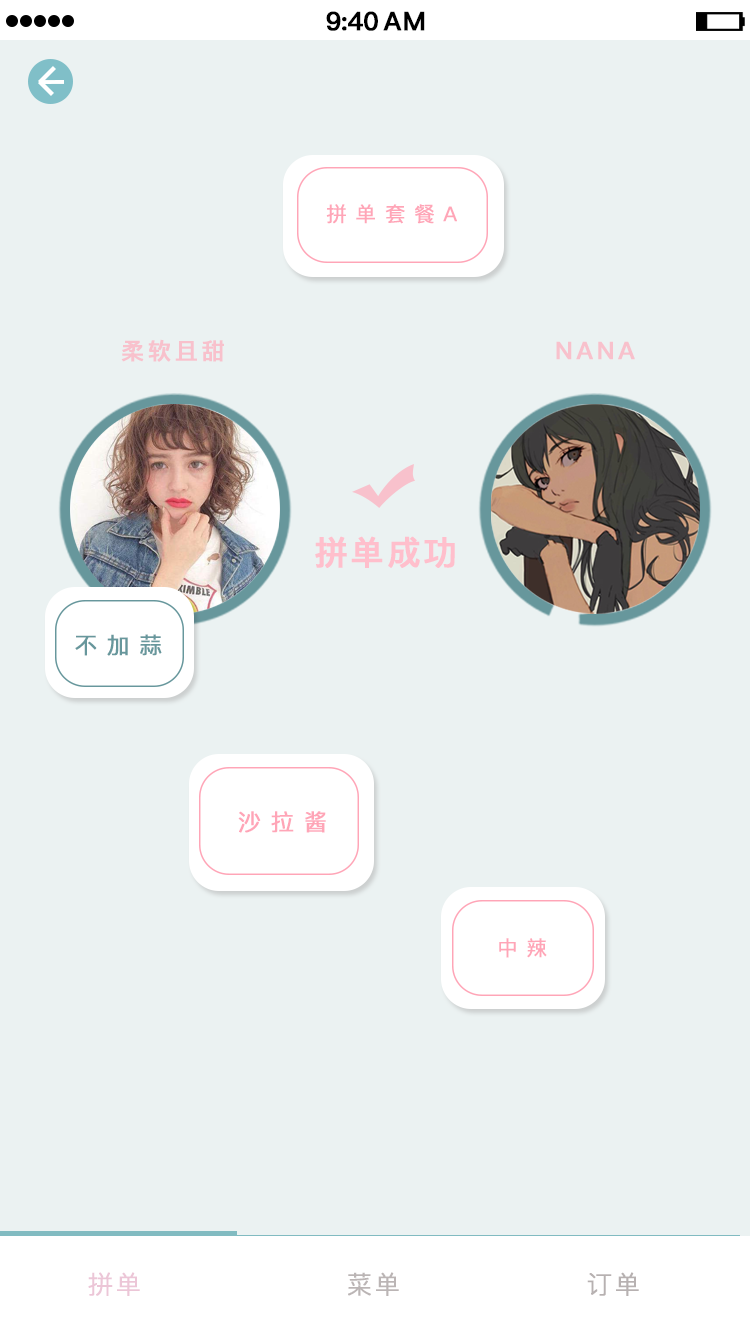
<style>
.page{position:relative;width:750px;height:1334px;background:#ebf2f2}
.page>*{position:absolute;margin:0}
.t1{font:25.4px "PingFang-SC-Bold";letter-spacing:-0.028em;color:#000000;font-weight:bold}
.t2{font:25.4px "PingFang-SC-Bold";letter-spacing:0.052em;color:#000000;font-weight:bold}
.t3{font:20.4px "PingFang-SC-Medium";letter-spacing:0.412em;color:#ffa5b7;font-weight:bold}
.t4{font:23px "PingFang-SC-Bold";letter-spacing:0.143em;color:#f8c1cc;font-weight:bold}
.t5{font:24px "PingFang-SC-Bold";letter-spacing:0.143em;color:#f8c1cc;font-weight:bold}
.t6{font:33px "PingFang-SC-Bold";letter-spacing:0.072em;color:#ffbfcc;font-weight:bold}
.t7{font:22.6px "PingFang-SC-Medium";letter-spacing:0.412em;color:#67979c;font-weight:bold}
.t8{font:22.9px "PingFang-SC-Medium";letter-spacing:0.412em;color:#ffa5b7;font-weight:bold}
.t9{font:25px "PingFang-SC-Regular";letter-spacing:0.085em;color:#ecc6d7;font-weight:bold}
.t10{font:25px "PingFang-SC-Regular";letter-spacing:0.085em;color:#bbb5b5;font-weight:bold}
.t11{font:25px "PingFang-SC-Regular";letter-spacing:0.085em;color:#b7b1b1;font-weight:bold}
</style>
<div class="page">
<p class="t1" style="left:326px;top:11px;width:52px;height:20px">9:40</p>
<p class="t2" style="left:383px;top:11px;width:42px;height:20px">AM</p>
<p class="t3" style="left:326px;top:204px;width:131px;height:20px">拼单套餐A</p>
<p class="t4" style="left:121px;top:339px;width:103px;height:23px">柔软且甜</p>
<p class="t5" style="left:556px;top:341px;width:79px;height:19px">NANA</p>
<p class="t6" style="left:315px;top:536px;width:140px;height:32px">拼单成功</p>
<p class="t7" style="left:75px;top:634px;width:87px;height:22px">不加蒜</p>
<p class="t8" style="left:238px;top:811px;width:88px;height:22px">沙拉酱</p>
<p class="t3" style="left:499px;top:938px;width:48px;height:20px">中辣</p>
<p class="t9" style="left:88px;top:1272px;width:52px;height:24px">拼单</p>
<p class="t10" style="left:348px;top:1272px;width:51px;height:24px">菜单</p>
<p class="t11" style="left:587px;top:1272px;width:52px;height:24px">订单</p>
</div>
